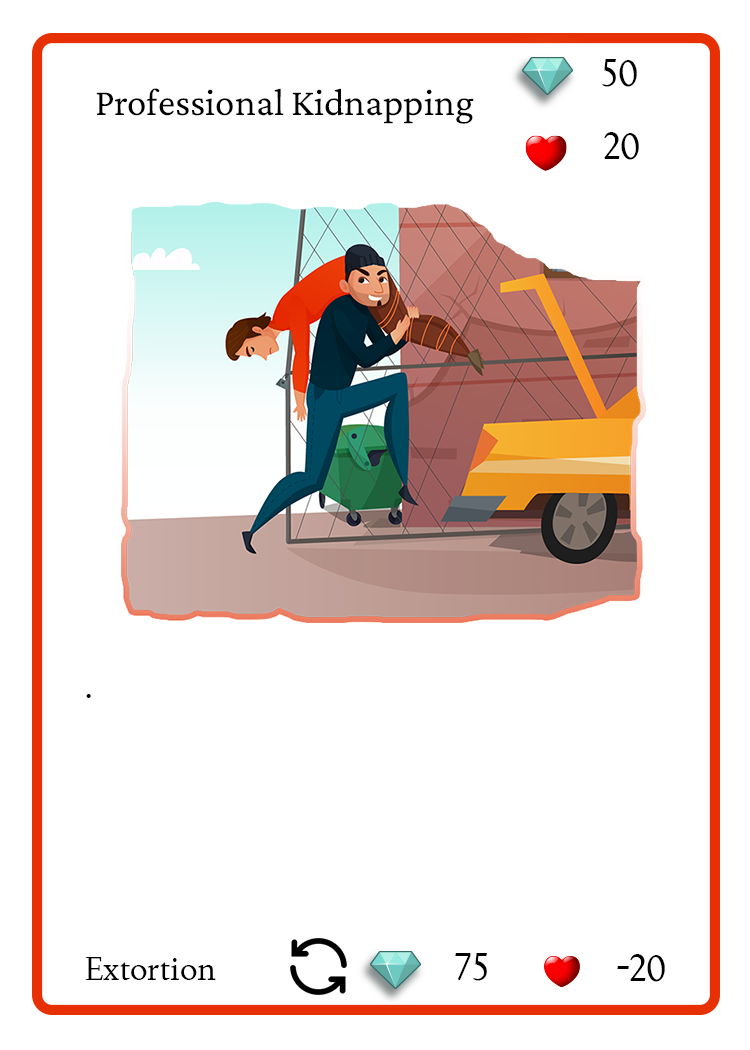
<style>
.page{position:relative;width:750px;height:1050px;background:#ffffff}
.page>*{position:absolute;margin:0}
.t1{font:37.5px "Joan-Regular";color:#000000;text-transform:uppercase}
.t2{font:38.9px "CrimsonPro-Regular";color:#000000}
.t3{font:33.3px "Joan-Regular";color:#000000}
</style>
<div class="page">
<p class="t1" style="left:602px;top:59px;width:35px;height:28px">50</p>
<p class="t2" style="left:96px;top:88px;width:378px;height:36px">Professional Kidnapping</p>
<p class="t1" style="left:604px;top:132px;width:35px;height:28px">20</p>
<p class="t3" style="left:86px;top:694px;width:5px;height:4px">.</p>
<p class="t1" style="left:455px;top:953px;width:32px;height:28px">75</p>
<p class="t3" style="left:85px;top:957px;width:131px;height:23px">Extortion</p>
<p class="t1" style="left:617px;top:954px;width:48px;height:28px">-20</p>
</div>
